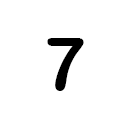
<style>
.page{position:relative;width:128px;height:128px;background:#ffffff}
.page>*{position:absolute;margin:0}
.t1{font:73px "ArialRoundedMTBold";letter-spacing:0.4em;color:#000000}
</style>
<div class="page">
<p class="t1" style="left:47px;top:38px;width:37px;height:53px">7</p>
</div>
